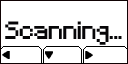
<style>
.page{position:relative;width:128px;height:64px;background:#ffffff}
.page>*{position:absolute;margin:0}
.t1{font:23.3px "Minecraft";color:#060507}
</style>
<div class="page">
<p class="t1" style="left:5px;top:21px;width:117px;height:24px">Scanning...</p>
</div>
